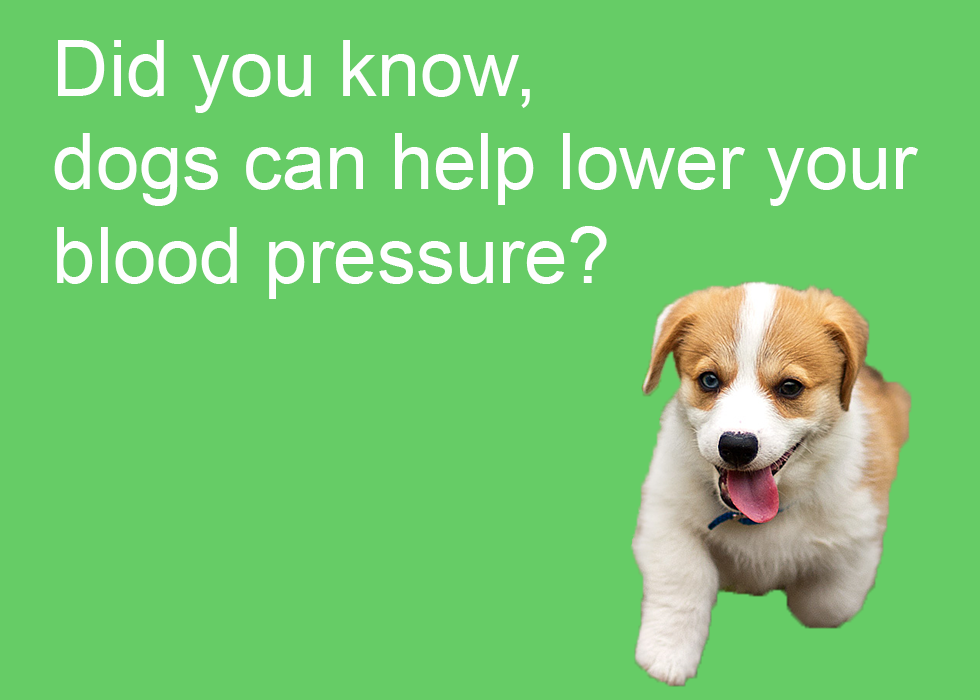
<style>
.page{position:relative;width:980px;height:700px;background:#66cc66}
.page>*{position:absolute;margin:0}
.t1{font:77.8px "ArialMT";color:#fefefe}
</style>
<div class="page">
<p class="t1" style="left:54px;top:40px;width:864px;height:259px">Did you know,<br>dogs can help lower your<br>blood pressure?</p>
</div>
